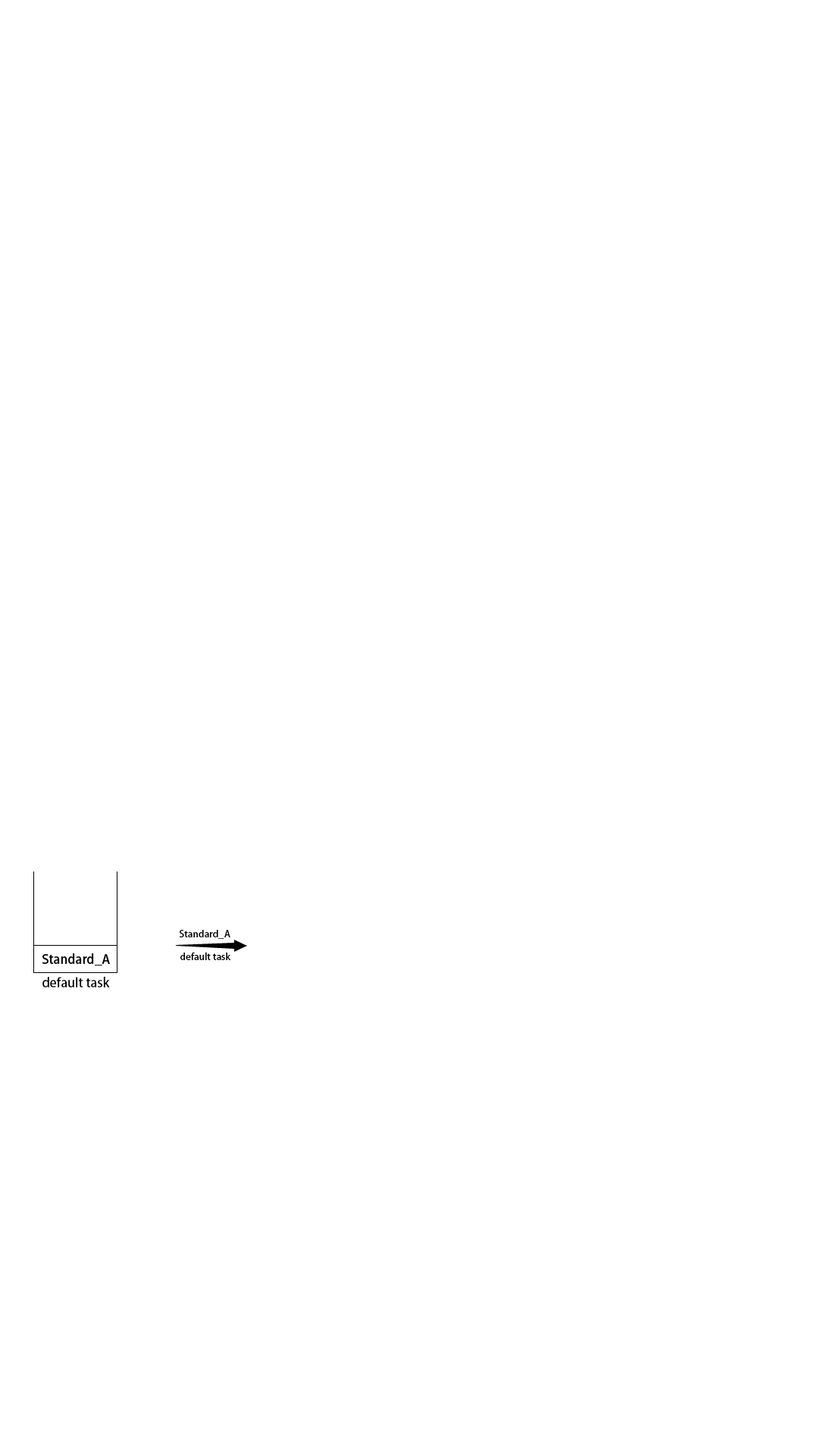
<style>
.page{position:relative;width:820px;height:1455px;background:#ffffff}
.page>*{position:absolute;margin:0}
.t1{font:9.5px "AdobeHeitiStd-Regular";color:#000000}
</style>
<div class="page">
<p class="t1" style="left:179px;top:930px;width:51px;height:9px">Standard_A</p>
<p class="t1" style="left:180px;top:952px;width:51px;height:8px">default task</p>
</div>
